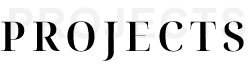
<style>
.page{position:relative;width:248px;height:64px;background:#ffffff}
.page>*{position:absolute;margin:0}
.t1{font:41px "NotoSerifDisplay-SemiBold";letter-spacing:0.15em;color:#000000}
</style>
<div class="page">
<p class="t1" style="left:1px;top:21px;width:243px;height:40px">PROJECTS</p>
</div>
